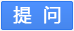
<style>
.page{position:relative;width:74px;height:31px}
.page>*{position:absolute;margin:0}
.t1{font:18px "MicrosoftYaHei";color:#ffffff;font-weight:bold}
</style>
<div class="page">
<p class="t1" style="left:13px;top:6px;width:48px;height:18px">提 问</p>
</div>
